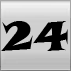
<style>
.page{position:relative;width:71px;height:71px}
.page>*{position:absolute;margin:0}
.t1{font:40px "SnapITC-Regular";color:#000000}
</style>
<div class="page">
<p class="t1" style="left:1px;top:21px;width:67px;height:30px">24</p>
</div>
